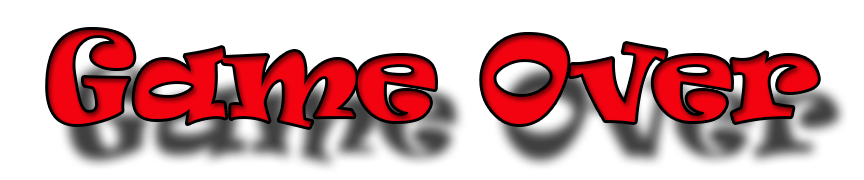
<style>
.page{position:relative;width:864px;height:180px;background:#ffffff}
.page>*{position:absolute;margin:0}
.t1{font:110px "Ravie";color:#e60721}
</style>
<div class="page">
<p class="t1" style="left:48px;top:30px;width:770px;height:97px">Game Over</p>
</div>
